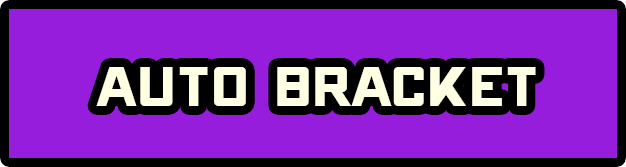
<style>
.page{position:relative;width:626px;height:167px;background:#971ddd}
.page>*{position:absolute;margin:0}
.t1{font:90px "ONRAMP";color:#ffffe3}
</style>
<div class="page">
<p class="t1" style="left:96px;top:67px;width:440px;height:39px">AUTO BRACKET</p>
</div>
